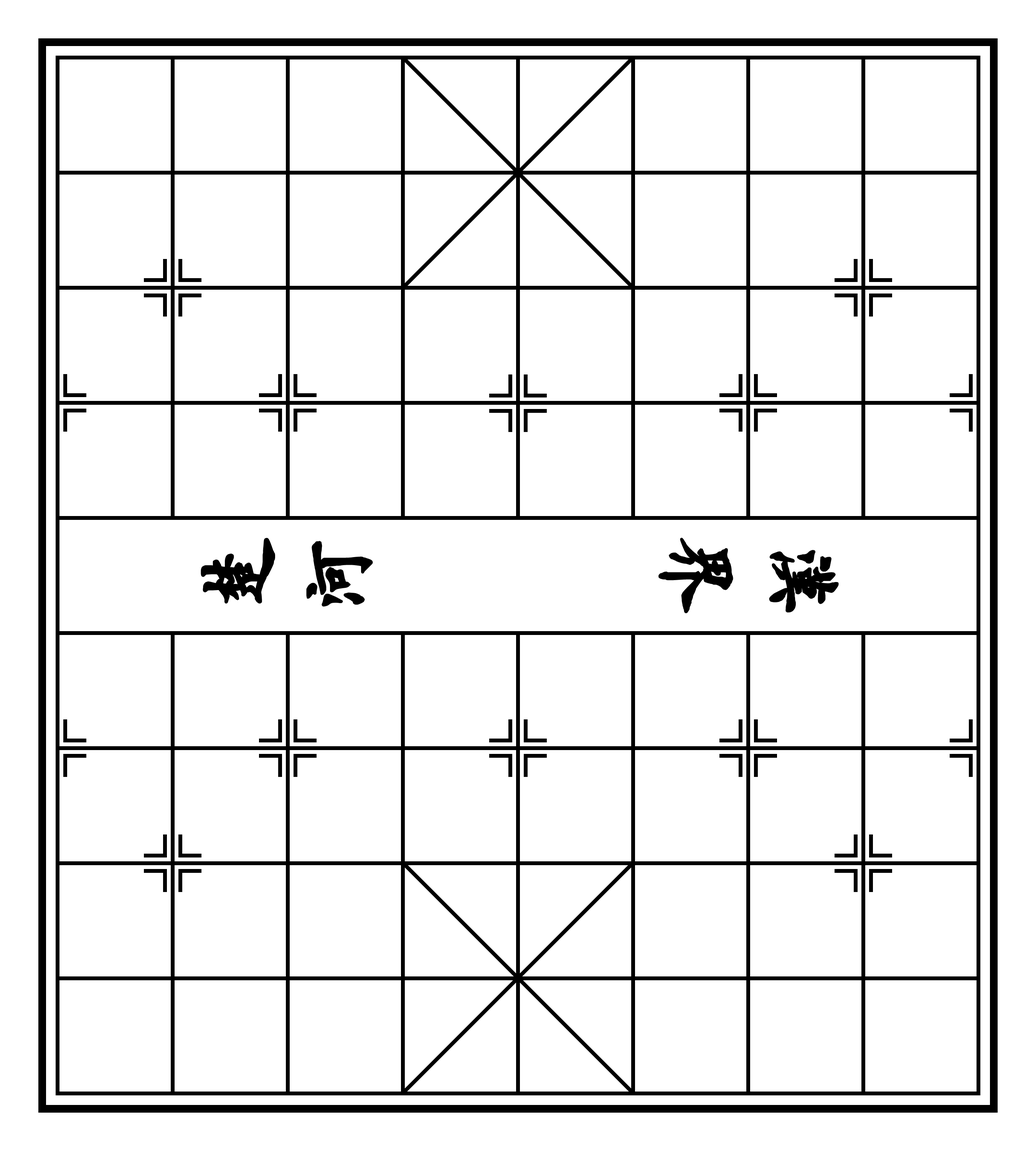
<style>
.page{position:relative;width:1036px;height:1151px;background:#ffffff}
.page>*{position:absolute;margin:0}
.t1{font:95.9px "3500-";letter-spacing:0.1em;color:#000000;font-weight:bold}
</style>
<div class="page">
<p class="t1" style="left:201px;top:538px;width:172px;height:69px;rotate:-90deg">楚河</p>
<p class="t1" style="left:658px;top:538px;width:181px;height:76px;rotate:90deg">汉界</p>
</div>
